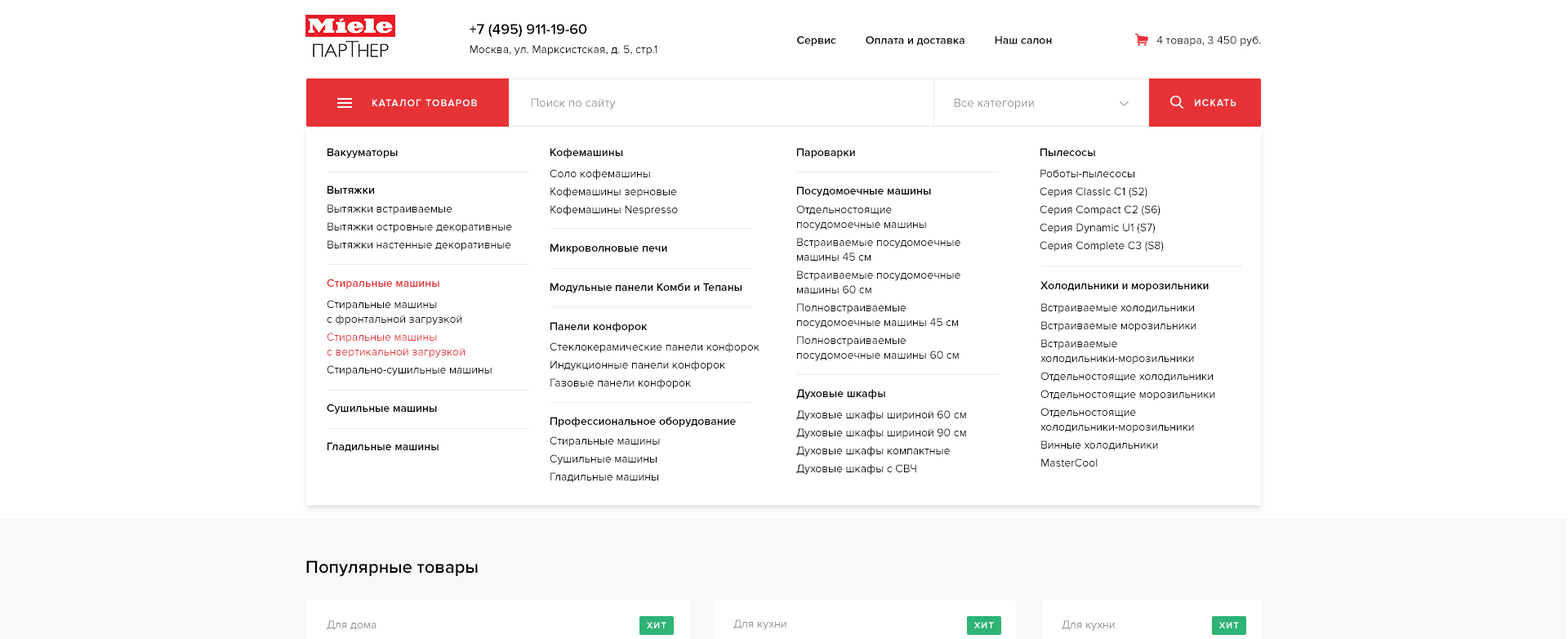
<style>
.page{position:relative;width:1568px;height:639px;background:#ffffff}
.page>*{position:absolute;margin:0}
.t1{font:11.4px "ProximaNova-Semibold";color:#000000}
.t2{font:11.4px/18px "ProximaNova-Regular";color:#000000}
.t3{font:11.4px/14.7px "ProximaNova-Regular";color:#000000}
.t4{font:11.4px "ProximaNova-Semibold";color:#e63136}
.t5{font:11.4px/18px "ProximaNova-Regular";color:#e73237}
.t6{font:11.4px/14.7px "ProximaNova-Regular";color:#e73237}
</style>
<div class="page">
<p class="t1" style="left:327px;top:148px;width:71px;height:10px">Вакууматоры</p>
<p class="t1" style="left:550px;top:148px;width:73px;height:10px">Кофемашины</p>
<p class="t1" style="left:797px;top:148px;width:58px;height:10px">Пароварки</p>
<p class="t1" style="left:1040px;top:148px;width:55px;height:8px">Пылесосы</p>
<p class="t2" style="left:550px;top:169px;width:128px;height:47px">Соло кофемашины<br>Кофемашины зерновые<br>Кофемашины Nespresso</p>
<p class="t2" style="left:1040px;top:169px;width:124px;height:83px">Роботы-пылесосы<br>Серия Classic C1 (S2)<br>Серия Compact C2 (S6)<br>Серия Dynamic U1 (S7)<br>Серия Complete C3 (S8)</p>
<p class="t1" style="left:327px;top:185px;width:47px;height:9px">Вытяжки</p>
<p class="t1" style="left:797px;top:186px;width:134px;height:11px">Посудомоечные машины</p>
<p class="t2" style="left:327px;top:204px;width:185px;height:47px">Вытяжки встраиваемые<br>Вытяжки островные декоративные<br>Вытяжки настенные декоративные</p>
<p class="t2" style="left:796px;top:205px;width:164px;height:156px">Отдельностоящие<br><span class="t3">посудомоечные машины<br></span>Встраиваемые посудомоечные<br><span class="t3">машины 45 см<br></span>Встраиваемые посудомоечные<br><span class="t3">машины 60 см<br></span>Полновстраиваемые<br><span class="t3">посудомоечные машины 45 см<br></span>Полновстраиваемые<br><span class="t3">посудомоечные машины 60 см</span></p>
<p class="t1" style="left:550px;top:243px;width:117px;height:11px">Микроволновые печи</p>
<p class="t4" style="left:327px;top:278px;width:112px;height:11px">Стиральные машины</p>
<p class="t1" style="left:1040px;top:281px;width:169px;height:11px">Холодильники и морозильники</p>
<p class="t1" style="left:550px;top:283px;width:192px;height:10px">Модульные панели Комби и Тепаны</p>
<p class="t2" style="left:327px;top:300px;width:165px;height:76px">Стиральные машины<br><span class="t3">с фронтальной загрузкой<br></span><span class="t5">Стиральные машины <br></span><span class="t6">с вертикальной загрузкой<br></span>Стирально-сушильные машины</p>
<p class="t2" style="left:1040px;top:303px;width:175px;height:163px">Встраиваемые холодильники<br>Встраиваемые морозильники<br>Встраиваемые<br><span class="t3">холодильники-морозильники<br></span>Отдельностоящие холодильники<br>Отдельностоящие морозильники<br>Отдельностоящие<br><span class="t3">холодильники-морозильники<br></span>Винные холодильники<br>MasterCool</p>
<p class="t1" style="left:550px;top:322px;width:98px;height:10px">Панели конфорок</p>
<p class="t2" style="left:550px;top:342px;width:210px;height:47px">Стеклокерамические панели конфорок<br>Индукционные панели конфорок<br>Газовые панели конфорок</p>
<p class="t1" style="left:796px;top:389px;width:89px;height:10px">Духовые шкафы</p>
<p class="t1" style="left:327px;top:403px;width:110px;height:11px">Сушильные машины</p>
<p class="t2" style="left:796px;top:410px;width:170px;height:64px">Духовые шкафы шириной 60 см<br>Духовые шкафы шириной 90 см<br>Духовые шкафы компактные<br>Духовые шкафы с СВЧ</p>
<p class="t1" style="left:550px;top:416px;width:186px;height:11px">Профессиональное оборудование</p>
<p class="t2" style="left:550px;top:436px;width:110px;height:46px">Стиральные машины<br>Сушильные машины<br>Гладильные машины</p>
<p class="t1" style="left:327px;top:442px;width:112px;height:10px">Гладильные машины</p>
</div>
